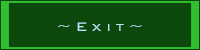
<style>
.page{position:relative;width:200px;height:50px;background:#0c470c}
.page>*{position:absolute;margin:0}
.t1{font:16.7px "BankGothicBT-Light";letter-spacing:0.28em;color:#b8e7f8}
</style>
<div class="page">
<p class="t1" style="left:58px;top:22px;width:84px;height:9px">~Exit~</p>
</div>
